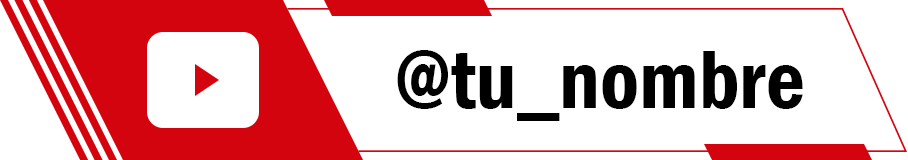
<style>
.page{position:relative;width:908px;height:160px;background:#ffffff}
.page>*{position:absolute;margin:0}
.t1{font:85.3px "FranklinGothic-DemiCond";color:#000000}
</style>
<div class="page">
<p class="t1" style="left:397px;top:50px;width:406px;height:71px">@tu_nombre</p>
</div>
